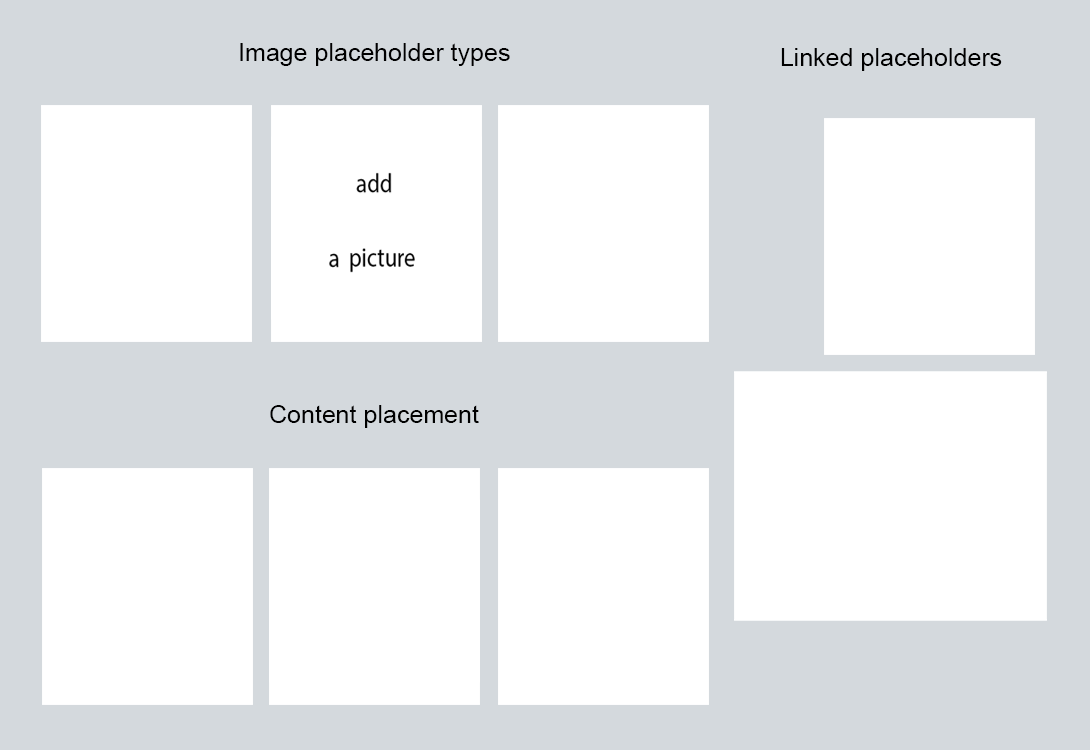
<style>
.page{position:relative;width:1090px;height:750px;background:#ffffff}
.page>*{position:absolute;margin:0}
.t1{font:25px "ArialMT";color:#000000}
</style>
<div class="page">
<p class="t1" style="left:240px;top:43px;width:270px;height:23px">Image placeholder types</p>
<p class="t1" style="left:781px;top:48px;width:221px;height:23px">Linked placeholders</p>
<p class="t1" style="left:270px;top:405px;width:209px;height:23px">Content placement</p>
</div>
